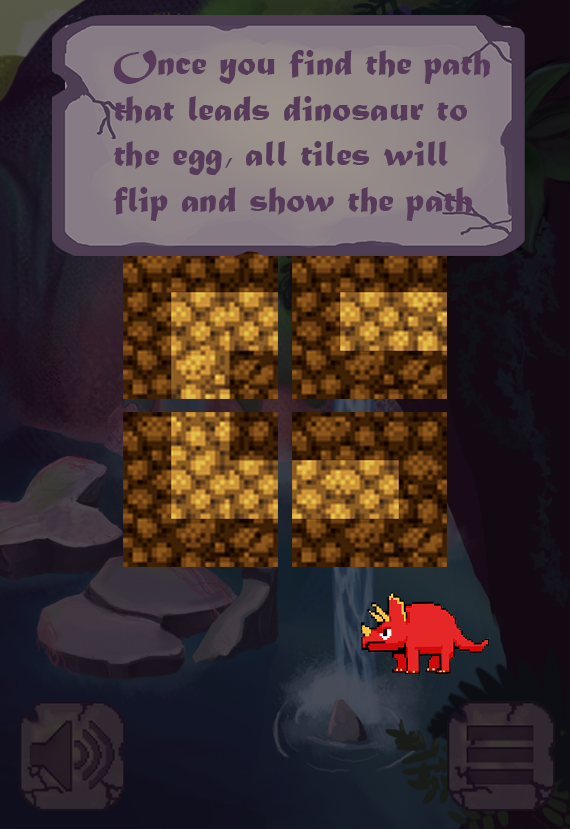
<style>
.page{position:relative;width:570px;height:829px}
.page>*{position:absolute;margin:0}
.t1{font:38px "MaturaMTScriptCapitals";color:#573a5a}
</style>
<div class="page">
<p class="t1" style="left:113px;top:50px;width:377px;height:171px">Once you find the path <br>that leads dinosaur to <br>the egg, all tiles will <br>flip and show the path</p>
</div>
